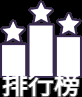
<style>
.page{position:relative;width:82px;height:97px;background:#ffffff}
.page>*{position:absolute;margin:0}
.t1{font:26px "WebPSD-18463539-0-Regular";color:#ffffff;font-weight:bold}
</style>
<div class="page">
<p class="t1" style="left:0px;top:71px;width:82px;height:26px">排行榜</p>
</div>
